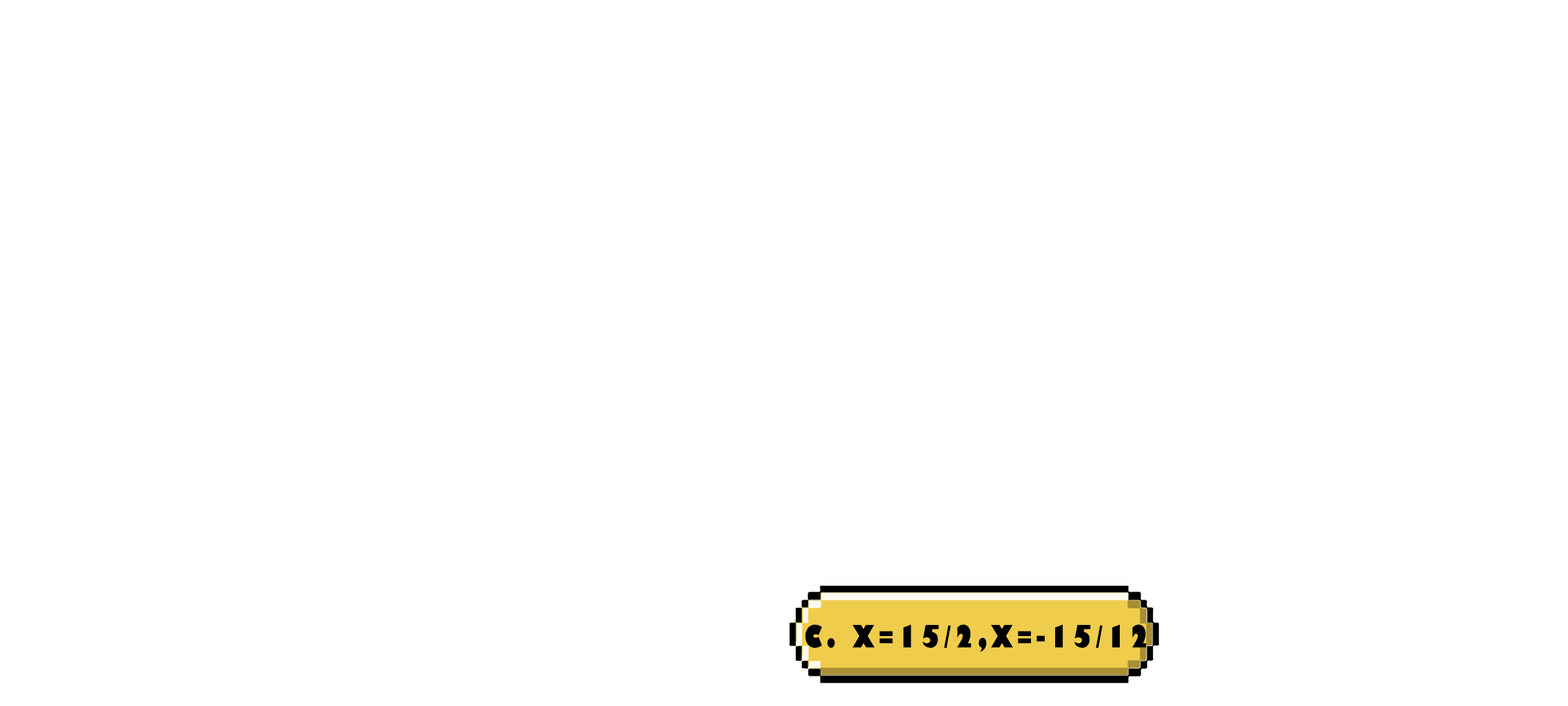
<style>
.page{position:relative;width:1568px;height:706px;background:#ffffff}
.page>*{position:absolute;margin:0}
.t1{font:29.9px "GillSans-UltraBoldCondensed";letter-spacing:0.115em;color:#000000;text-transform:uppercase;scale:1.12 1}
</style>
<div class="page">
<p class="t1" style="left:805px;top:624px;width:342px;height:27px">c. X=15/2,X=-15/12</p>
</div>
